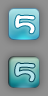
<style>
.page{position:relative;width:48px;height:96px}
.page>*{position:absolute;margin:0}
.t1{font:24px "DFMaruMoji-W9-WING-RKSJ-H";color:#ffffff;font-weight:bold}
.t2{font:24px "DFMaruMoji-W9-WING-RKSJ-H";color:#b5e3e9;font-weight:bold}
</style>
<div class="page">
<p class="t1" style="left:15px;top:15px;width:20px;height:19px">5</p>
<p class="t2" style="left:15px;top:63px;width:20px;height:19px">5</p>
</div>
